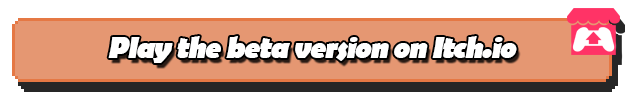
<style>
.page{position:relative;width:625px;height:100px;background:#e59772}
.page>*{position:absolute;margin:0}
.t1{font:30px "BerlinSansFB-Bold";letter-spacing:-0.04em;color:#ffffff;font-style:italic}
</style>
<div class="page">
<p class="t1" style="left:108px;top:36px;width:409px;height:27px">Play the beta version on Itch.io</p>
</div>
